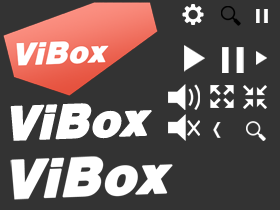
<style>
.page{position:relative;width:280px;height:210px;background:#333333}
.page>*{position:absolute;margin:0}
.t1{font:50px "HelveticaObl-He";color:#ffffff;font-weight:bold}
</style>
<div class="page">
<p class="t1" style="left:10px;top:103px;width:142px;height:38px;rotate:-2deg">ViBox</p>
</div>
